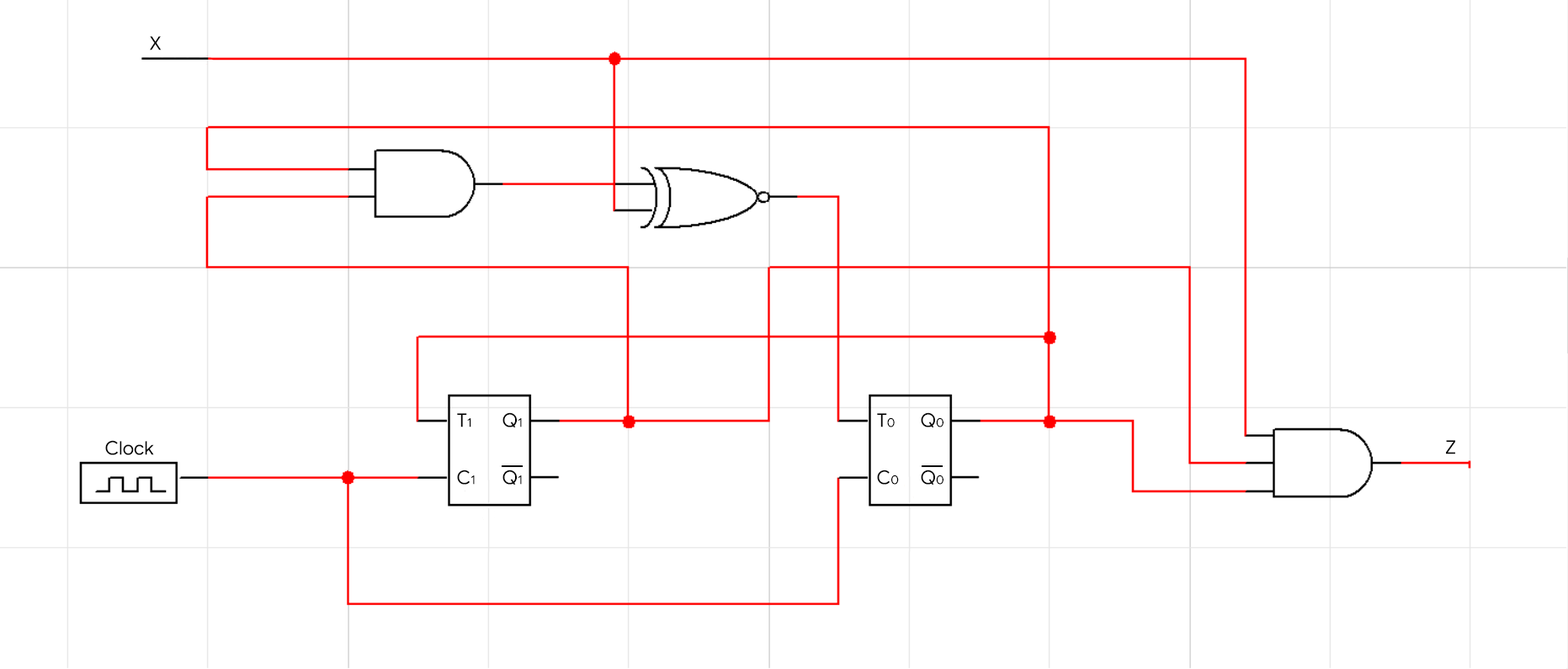
<style>
.page{position:relative;width:1568px;height:669px;background:#ffffff}
.page>*{position:absolute;margin:0}
.t1{font:18.9px "GoogleSans-Regular";color:#000000}
.t2{font:12.6px "GoogleSans-Regular";color:#000000}
</style>
<div class="page">
<p class="t1" style="left:150px;top:36px;width:12px;height:14px">X</p>
<p class="t1" style="left:457px;top:413px;width:14px;height:15px">T<span class="t2">1</span></p>
<p class="t1" style="left:502px;top:412px;width:20px;height:16px">Q<span class="t2">1</span></p>
<p class="t1" style="left:877px;top:413px;width:18px;height:15px">T<span class="t2">0</span></p>
<p class="t1" style="left:921px;top:412px;width:22px;height:16px">Q<span class="t2">0</span></p>
<p class="t1" style="left:105px;top:440px;width:49px;height:15px">Clock</p>
<p class="t1" style="left:1446px;top:440px;width:9px;height:14px">Z</p>
<p class="t1" style="left:457px;top:470px;width:18px;height:15px">C<span class="t2">1</span></p>
<p class="t1" style="left:502px;top:470px;width:20px;height:16px">Q<span class="t2">1</span></p>
<p class="t1" style="left:877px;top:470px;width:22px;height:15px">C<span class="t2">0</span></p>
<p class="t1" style="left:921px;top:470px;width:22px;height:16px">Q<span class="t2">0</span></p>
</div>
